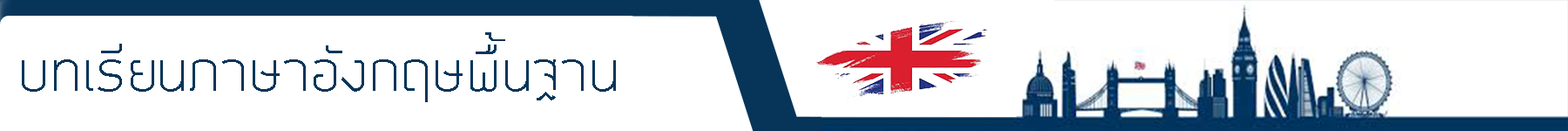
<style>
.page{position:relative;width:1568px;height:131px;background:#ffffff}
.page>*{position:absolute;margin:0}
.t1{font:52.3px "EkkamaiNew-Regular";color:#073559}
</style>
<div class="page">
<p class="t1" style="left:22px;top:32px;width:594px;height:70px">บทเรียนภาษาอังกฤษพื้นฐาน</p>
</div>
